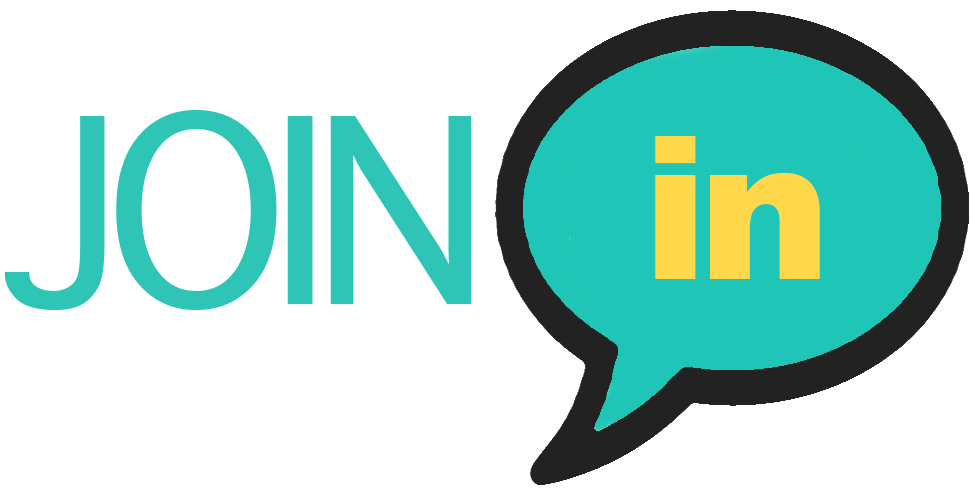
<style>
.page{position:relative;width:971px;height:488px;background:#ffffff}
.page>*{position:absolute;margin:0}
.t1{font:350px "AppleSymbols";letter-spacing:-0.05em;color:#2ec4b6}
.t2{font:200px "Arial-Black";letter-spacing:-0.05em;color:#ffd74a}
</style>
<div class="page">
<p class="t1" style="left:4px;top:110px;width:468px;height:200px">JOIN</p>
<p class="t2" style="left:655px;top:136px;width:165px;height:143px">in</p>
</div>
